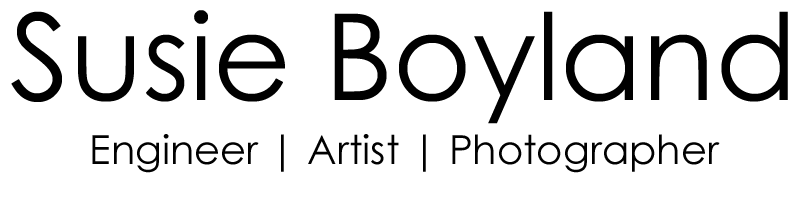
<style>
.page{position:relative;width:800px;height:200px;background:#ffffff}
.page>*{position:absolute;margin:0}
.t1{font:40px/64px "CenturyGothic";color:#000000}
.t2{font:120px/64px "CenturyGothic";color:#000000}
</style>
<div class="page">
<p class="t1" style="left:11px;top:10px;width:777px;height:163px;text-align:center"><span class="t2">Susie Boyland<br></span>Engineer | Artist | Photographer</p>
</div>
